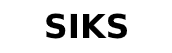
<style>
.page{position:relative;width:172px;height:53px;background:#ffffff}
.page>*{position:absolute;margin:0}
.t1{font:33px "DejaVuSans-Bold";color:#000000}
</style>
<div class="page">
<p class="t1" style="left:46px;top:13px;width:81px;height:26px">SIKS</p>
</div>
